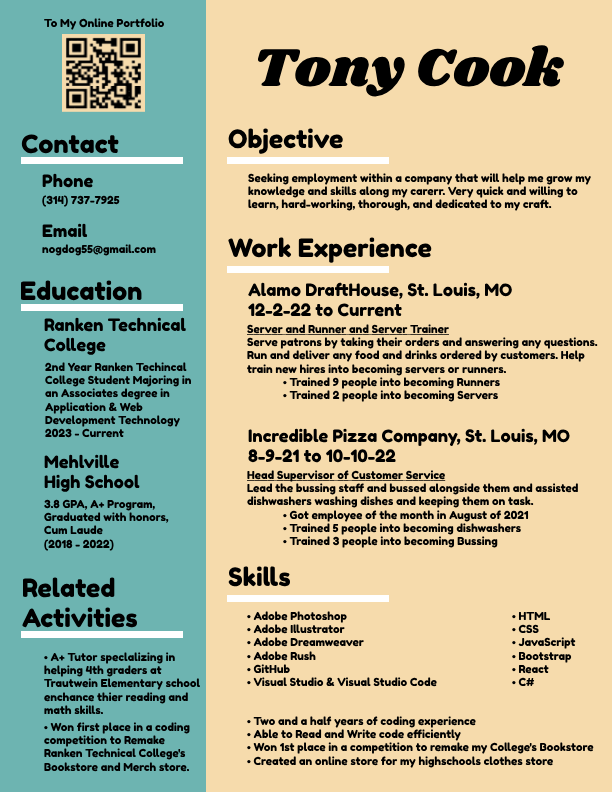
<style>
.page{position:relative;width:612px;height:792px;background:#f6dbac}
.page>*{position:absolute;margin:0}
.t1{font:11px "FredokaOne-Regular";color:#249a9f}
.t2{font:11px "FredokaOne-Regular";color:#000000}
.t3{font:55px "Shrikhand-Regular";color:#000000}
.t4{font:55px "Shrikhand-Regular";color:#ffffff}
.t5{font:25.2px "FredokaOne-Regular";color:#000000}
.t6{font:17px "FredokaOne-Regular";color:#000000}
.t7{font:25.2px "FredokaOne-Regular";color:#ffc600}
.t8{font:11px "FredokaOne-Regular";color:#000000;text-decoration:underline}
.t9{font:11px "FredokaOne-Regular";color:#00d66f}
</style>
<div class="page">
<p class="t1" style="left:44px;top:18px;width:121px;height:12px">To My Online <span class="t2">Portfolio</span></p>
<p class="t3" style="left:257px;top:45px;width:307px;height:52px"><span class="t4">T</span>ony Cook</p>
<p class="t5" style="left:21px;top:134px;width:98px;height:20px">Contact</p>
<p class="t5" style="left:228px;top:128px;width:115px;height:26px">Objective</p>
<p class="t6" style="left:42px;top:173px;width:51px;height:15px">Phone</p>
<p class="t2" style="left:248px;top:173px;width:343px;height:38px">Seeking employment within a company that will help me grow my <br>knowledge and skills along my carerr. Very quick and willing to<br>learn, hard-working, thorough, and dedicated to my craft.</p>
<p class="t2" style="left:42px;top:195px;width:78px;height:12px">(314) 737-7925</p>
<p class="t6" style="left:42px;top:223px;width:46px;height:14px">Email</p>
<p class="t2" style="left:42px;top:244px;width:114px;height:12px">nogdog55@gmail.com</p>
<p class="t5" style="left:228px;top:237px;width:204px;height:26px">Work Experience</p>
<p class="t5" style="left:21px;top:280px;width:121px;height:21px"><span class="t7">E</span>ducation</p>
<p class="t6" style="left:248px;top:282px;width:264px;height:35px">Alamo DraftHouse, St. Louis, MO <br>12-2-22 to Current</p>
<p class="t6" style="left:44px;top:317px;width:142px;height:38px">Ranken Technical <br>College</p>
<p class="t2" style="left:247px;top:324px;width:351px;height:78px"><span class="t8">Server and Runner and Server Trainer<br></span>Serve patrons by taking their orders and answering any questions. <br>Run and deliver any food and drinks ordered by customers. Help<br>train new hires into becoming servers or runners.<br> • Trained 9 people into becoming Runners<br> • Trained 2 people into becoming Servers</p>
<p class="t2" style="left:45px;top:362px;width:146px;height:76px">2nd Year Ranken Techincal <br>College Student Majoring in <br>an Associates degree in <br>Application &amp; Web <br>Development Technology <br>2023 - Current</p>
<p class="t6" style="left:248px;top:428px;width:322px;height:35px">Incredible Pizza Company, St. Louis, MO <br>8-9-21 to 10-10-22</p>
<p class="t6" style="left:44px;top:454px;width:96px;height:38px">Mehlville <br>High School</p>
<p class="t2" style="left:247px;top:470px;width:331px;height:78px"><span class="t8">Head Supervisor of Customer Service<br></span>Lead the bussing staff and bussed alongside them and assisted<br>dishwashers washing dishes and keeping them on task.<br> • Got employee of the month in August of 2021<br> • Trained 5 people into becoming dishwashers<br> • Trained 3 people into becoming Bussing</p>
<p class="t2" style="left:44px;top:499px;width:125px;height:52px">3.8 GPA, A+ Program, <br>Graduated with honors, <br>Cum Laude<br>(2018 - 2022)</p>
<p class="t5" style="left:228px;top:566px;width:63px;height:21px">Skills</p>
<p class="t5" style="left:22px;top:577px;width:116px;height:51px">Related <br>Activities</p>
<p class="t2" style="left:247px;top:611px;width:190px;height:76px">• Adobe Photoshop<br>• Adobe Illustrator<br>• Adobe Dreamweaver<br>• Adobe Rush<br>• GitHub<br>• Visual Studio &amp; Visual Studio Code</p>
<p class="t2" style="left:512px;top:611px;width:64px;height:76px">• HTML<br>• CSS<br>• JavaScript<br>• Bootstrap<br>• React<br>• C#</p>
<p class="t2" style="left:44px;top:652px;width:156px;height:63px"><span class="t9">• </span>A+ Tutor speclalizing in <br>helping 4th graders at <br>Trautwein Elementary school<br>enchance thier reading and<br>math skills.</p>
<p class="t2" style="left:44px;top:722px;width:146px;height:50px">• Won first place in a coding<br>competition to Remake <br>Ranken Technical College's<br>Bookstore and Merch store.</p>
<p class="t2" style="left:247px;top:716px;width:347px;height:52px">• Two and a half years of coding experience<br>• Able to Read and Write code efficiently<br>• Won 1st place in a competition to remake my College's Bookstore<br>• Created an online store for my highschools clothes store</p>
</div>
